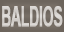
<style>
.page{position:relative;width:64px;height:32px}
.page>*{position:absolute;margin:0}
.t1{font:27.3px "Arial-BoldMT";letter-spacing:-0.03em;color:#dedbd8;font-weight:bold;scale:0.5 1}
</style>
<div class="page">
<p class="t1" style="left:2px;top:6px;width:61px;height:21px">BALDIOS</p>
</div>
